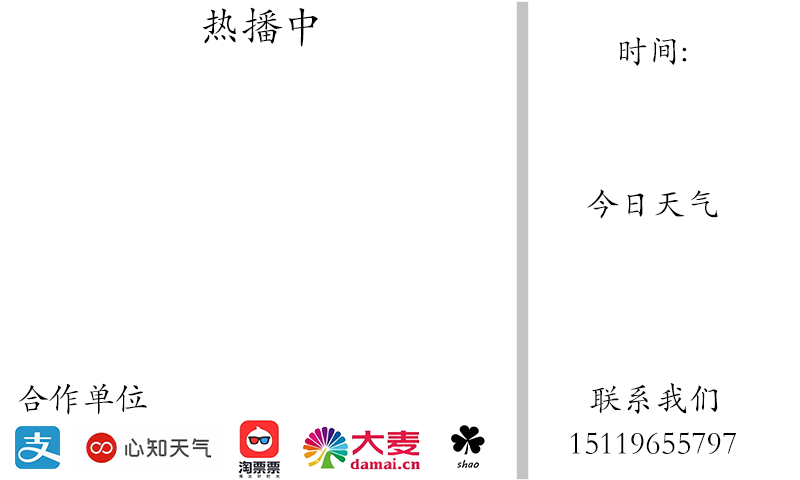
<style>
.page{position:relative;width:800px;height:480px;background:#ffffff}
.page>*{position:absolute;margin:0}
.t1{font:41.7px "STKaiti";color:#000000}
.t2{font:33.3px "STKaiti";color:#000000}
.t3{font:32.8px "STKaiti";color:#000000}
</style>
<div class="page">
<p class="t1" style="left:203px;top:7px;width:115px;height:40px">热播中</p>
<p class="t2" style="left:619px;top:37px;width:68px;height:29px">时间:</p>
<p class="t2" style="left:587px;top:189px;width:131px;height:30px">今日天气</p>
<p class="t2" style="left:18px;top:383px;width:129px;height:32px">合作单位</p>
<p class="t2" style="left:590px;top:383px;width:128px;height:31px">联系我们</p>
<p class="t3" style="left:570px;top:432px;width:166px;height:22px">15119655797</p>
</div>
